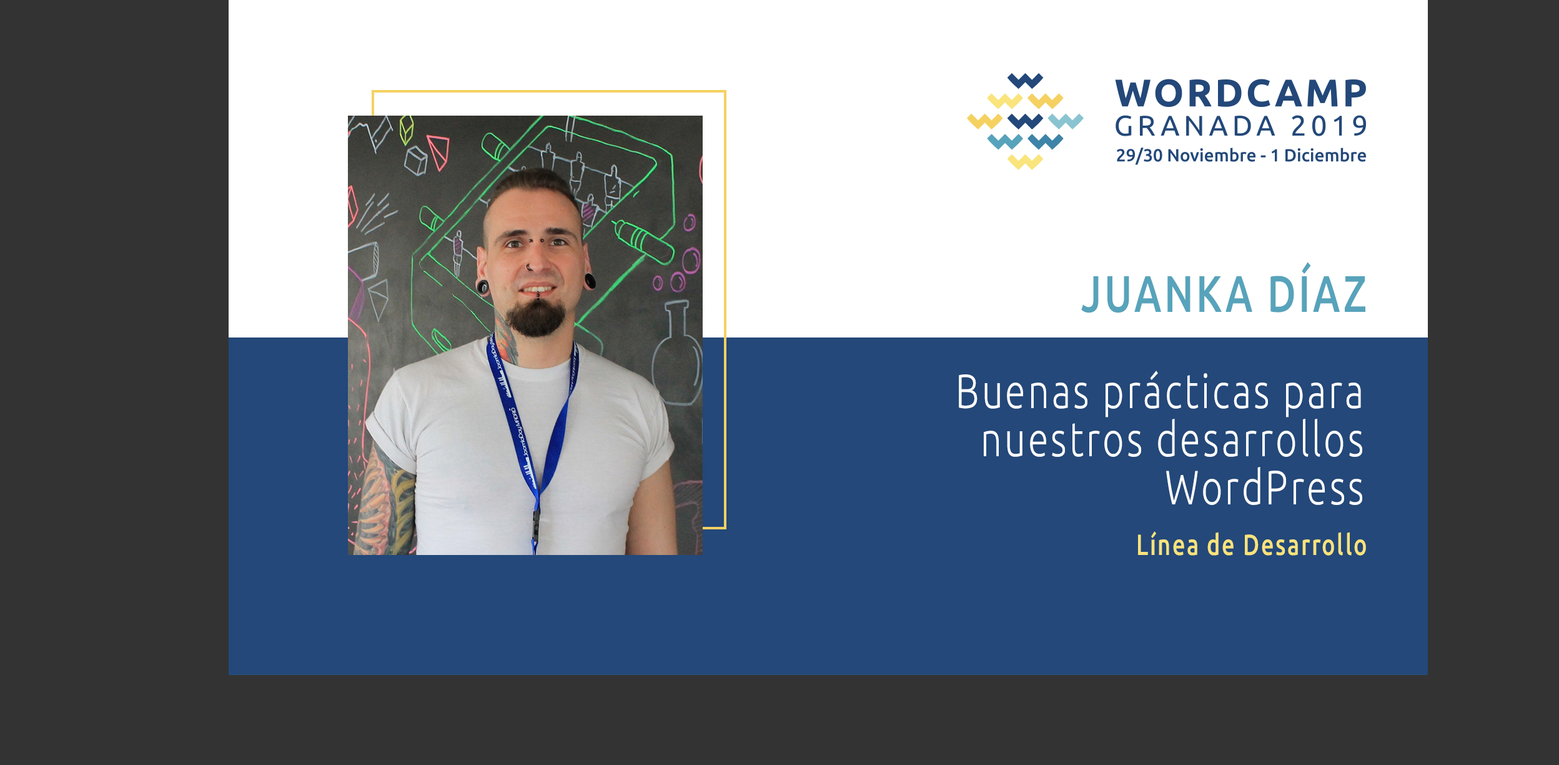
<style>
.page{position:relative;width:1559px;height:765px;background:#333333}
.page>*{position:absolute;margin:0}
.t1{font:51.4px "Ubuntu-Medium";letter-spacing:0.068em;color:#57a3bb;text-transform:uppercase;scale:0.77 1}
.t2{font:48.2px/48.2px "Ubuntu-Light";letter-spacing:0.068em;color:#ffffff;scale:0.77 1}
.t3{font:29.2px "Ubuntu-Medium";letter-spacing:0.068em;color:#f9e37b;scale:0.77 1}
</style>
<div class="page">
<p class="t1" style="left:1081px;top:262px;width:285px;height:51px">Juanka Díaz</p>
<p class="t2" style="left:959px;top:370px;width:404px;height:135px;text-align:right">Buenas prácticas para nuestros desarrollos WordPress</p>
<p class="t3" style="left:1138px;top:531px;width:228px;height:24px">Línea de Desarrollo</p>
</div>
